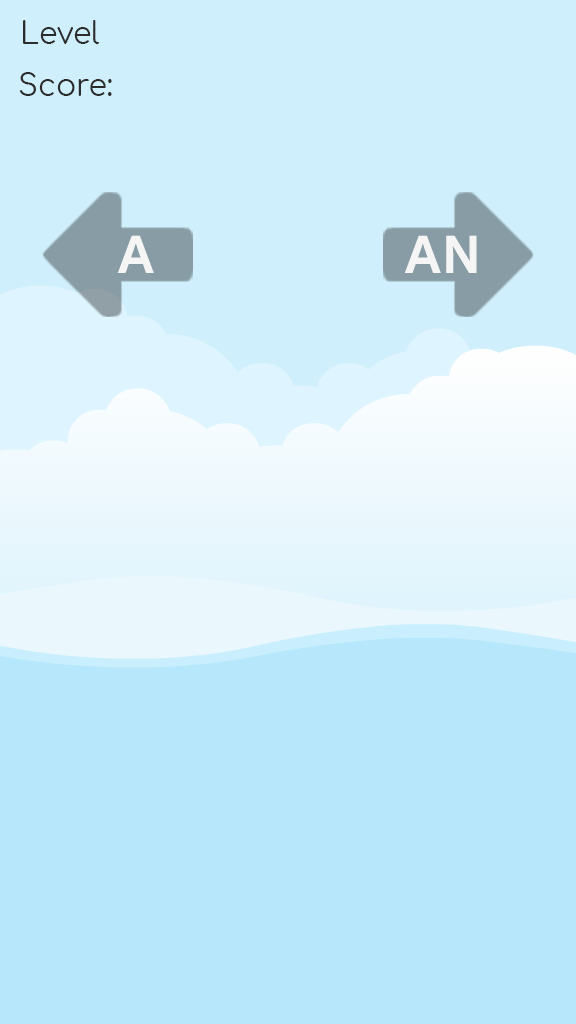
<style>
.page{position:relative;width:576px;height:1024px;background:#b7e7fa}
.page>*{position:absolute;margin:0}
.t1{font:30px "Comfortaa-Regular";color:#2b2b2b}
.t2{font:52.1px "GoogleSans-Bold";color:#f5f5f5}
</style>
<div class="page">
<p class="t1" style="left:23px;top:20px;width:76px;height:24px">Level</p>
<p class="t1" style="left:19px;top:72px;width:93px;height:24px">Score:</p>
<p class="t2" style="left:117px;top:235px;width:37px;height:38px">A</p>
<p class="t2" style="left:404px;top:235px;width:73px;height:38px">AN</p>
</div>
